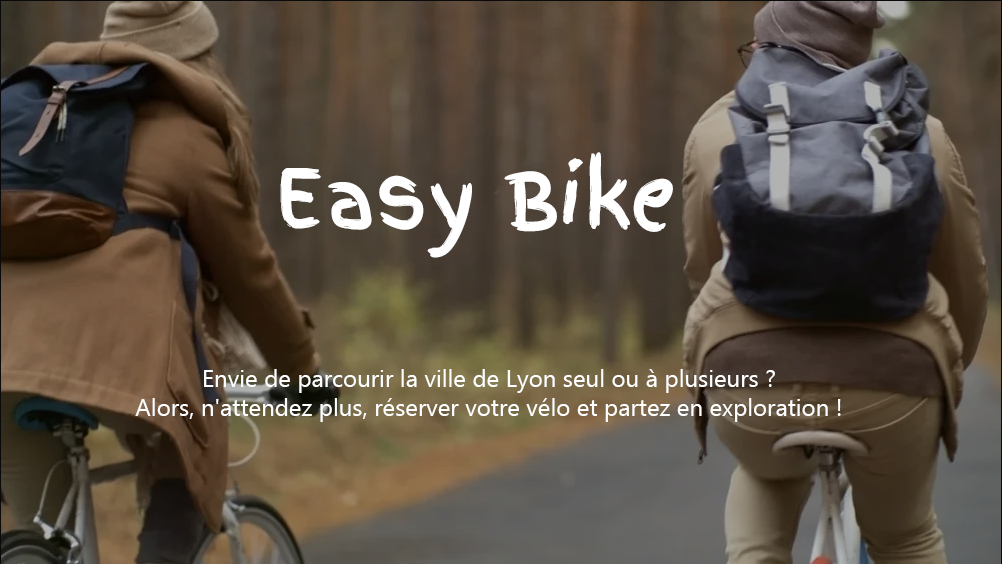
<style>
.page{position:relative;width:1002px;height:564px}
.page>*{position:absolute;margin:0}
.t1{font:80px "FingerPaint-Regular";color:#ffffff}
.t2{font:24px "Gadugi";color:#ffffff}
</style>
<div class="page">
<p class="t1" style="left:280px;top:152px;width:393px;height:106px">Easy Bike</p>
<p class="t2" style="left:135px;top:369px;width:706px;height:53px;text-align:center">Envie de parcourir la ville de Lyon seul ou à plusieurs ?<br>Alors, n'attendez plus, réserver votre vélo et partez en exploration !</p>
</div>
